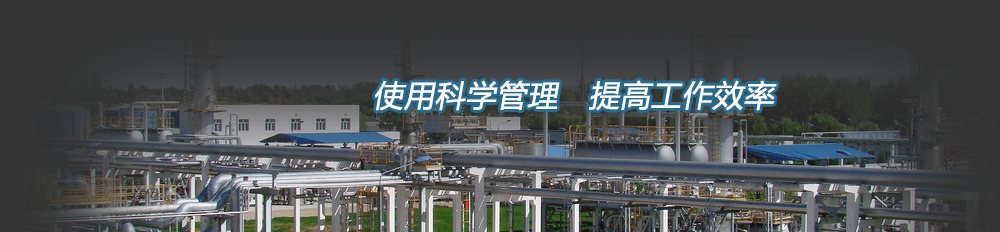
<style>
.page{position:relative;width:1000px;height:232px}
.page>*{position:absolute;margin:0}
.t1{font:30px "MicrosoftYaHei";color:#ffffff;font-weight:bold;font-style:italic}
</style>
<div class="page">
<p class="t1" style="left:375px;top:80px;width:402px;height:31px">使用科学管理　提高工作效率</p>
</div>
